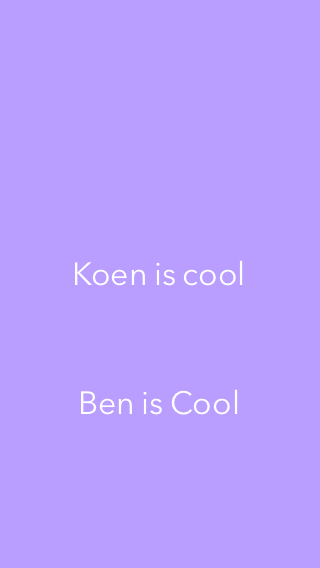
<style>
.page{position:relative;width:320px;height:568px;background:#ba9eff}
.page>*{position:absolute;margin:0}
.t1{font:32px "AvenirNext-Regular";color:#ffffff}
</style>
<div class="page">
<p class="t1" style="left:75px;top:260px;width:168px;height:26px">Koen is cool</p>
<p class="t1" style="left:81px;top:389px;width:157px;height:26px">Ben is Cool</p>
</div>
